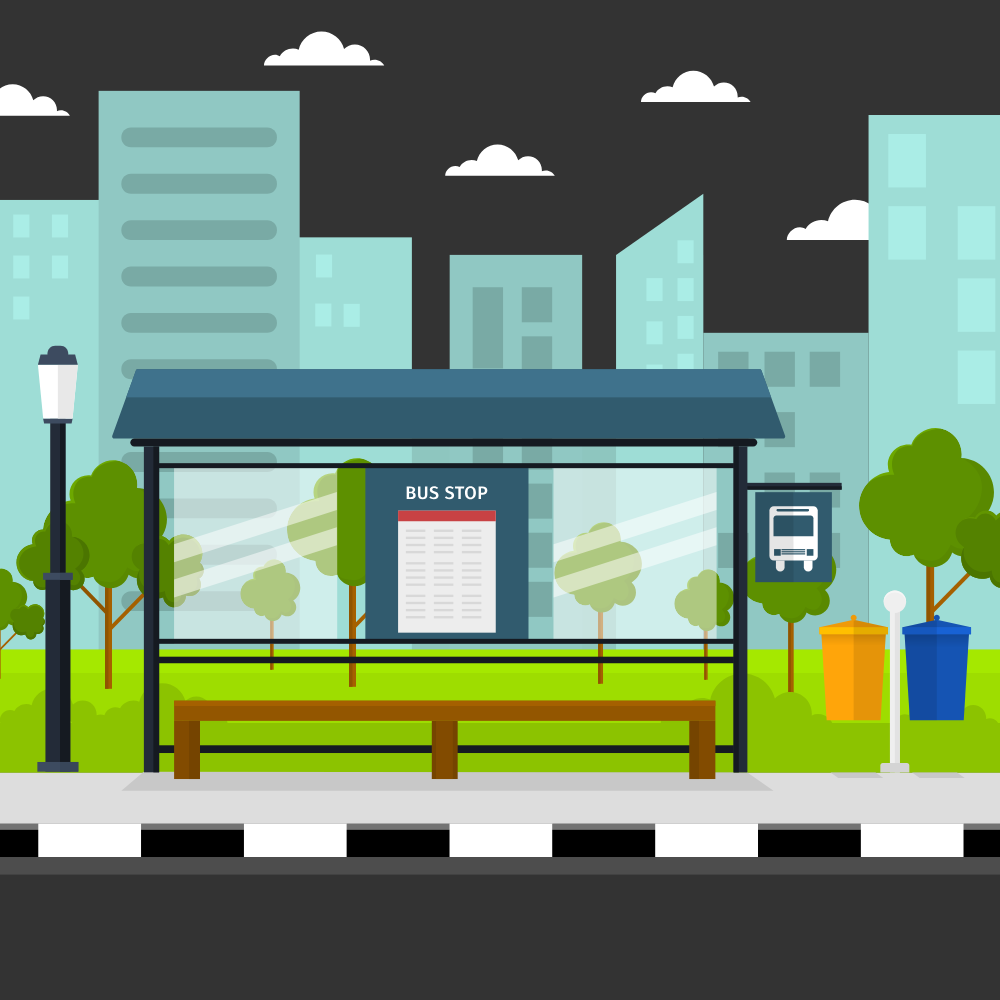
<style>
.page{position:relative;width:1000px;height:1000px;background:#333333}
.page>*{position:absolute;margin:0}
.t1{font:18.1px "FiraSans-Medium";letter-spacing:0.025em;color:#ffffff}
</style>
<div class="page">
<p class="t1" style="left:406px;top:486px;width:82px;height:14px">BUS STOP</p>
</div>
